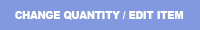
<style>
.page{position:relative;width:200px;height:30px;background:#8299df}
.page>*{position:absolute;margin:0}
.t1{font:18.2px "Arial-Black";color:#ffffff;scale:0.9 1}
</style>
<div class="page">
<p class="t1" style="left:15px;top:11px;width:169px;height:9px">CHANGE QUANTITY / EDIT ITEM</p>
</div>
